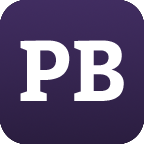
<style>
.page{position:relative;width:144px;height:144px}
.page>*{position:absolute;margin:0}
.t1{font:85.7px "Bitter-Bold";color:#ffffff}
</style>
<div class="page">
<p class="t1" style="left:20px;top:40px;width:104px;height:61px">PB</p>
</div>
